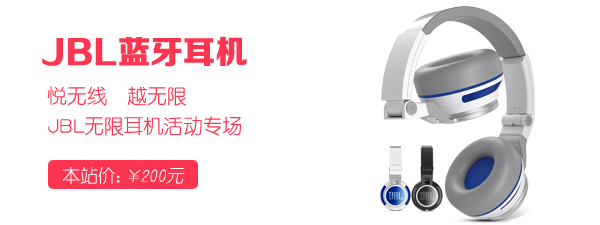
<style>
.page{position:relative;width:600px;height:225px;background:#ffffff}
.page>*{position:absolute;margin:0}
.t1{font:32px "FZZDHJW--GB1-0";color:#fd3551;font-weight:bold}
.t2{font:20px/30px "HYe2gj";color:#fd3551}
.t3{font:18px "HYe2gj";color:#ffffff;font-style:italic}
.t4{font:18px "HYe2gj";color:#ffffff}
</style>
<div class="page">
<p class="t1" style="left:42px;top:36px;width:205px;height:31px">JBL蓝牙耳机</p>
<p class="t2" style="left:47px;top:86px;width:194px;height:50px">悦无线  越无限<br>JBL无限耳机活动专场</p>
<p class="t3" style="left:62px;top:167px;width:123px;height:18px"><span class="t4">本站价：</span>￥200元</p>
</div>
